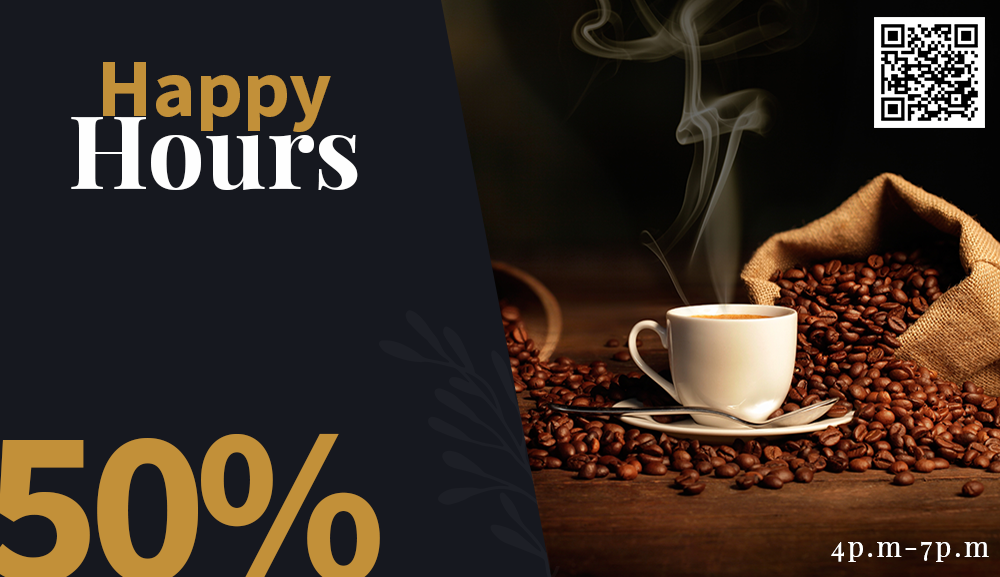
<style>
.page{position:relative;width:1000px;height:577px;background:#16181f}
.page>*{position:absolute;margin:0}
.t1{font:82px/73px "SourceSansPro-Bold";color:#c29039}
.t2{font:102px/73px "PlayfairDisplay-Bold";color:#fefefe}
.t3{font:28px "PlayfairDisplay-Regular";letter-spacing:0.1em;color:#ffffff}
</style>
<div class="page">
<p class="t1" style="left:71px;top:62px;width:287px;height:128px;text-align:center">Happy<br><span class="t2">Hours</span></p>
<p class="t3" style="left:831px;top:541px;width:158px;height:21px">4p.m-7p.m</p>
</div>
